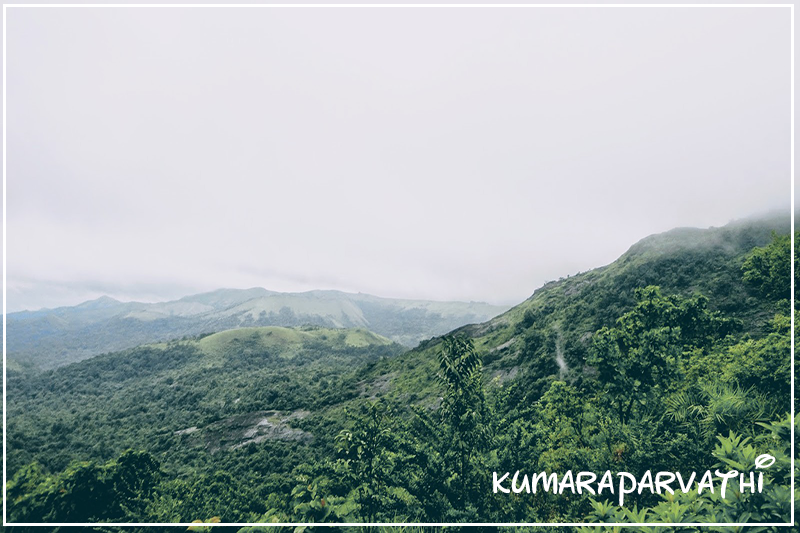
<style>
.page{position:relative;width:800px;height:533px}
.page>*{position:absolute;margin:0}
.t1{font:60px "New-Walt-Disney-Font";color:#ffffff}
</style>
<div class="page">
<p class="t1" style="left:493px;top:454px;width:283px;height:52px">kumaraparvathi</p>
</div>
